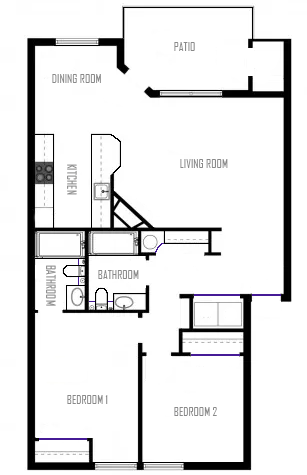
<style>
.page{position:relative;width:307px;height:475px;background:#ffffff}
.page>*{position:absolute;margin:0}
.t1{font:12px "AgencyFB-Reg";color:#8a8a8a}
</style>
<div class="page">
<p class="t1" style="left:174px;top:42px;width:21px;height:9px">PATIO</p>
<p class="t1" style="left:52px;top:74px;width:49px;height:9px">DINING ROOM</p>
<p class="t1" style="left:180px;top:159px;width:48px;height:9px">LIVING ROOM</p>
<p class="t1" style="left:67px;top:164px;width:10px;height:31px;rotate:90deg">KITCHEN</p>
<p class="t1" style="left:46px;top:265px;width:10px;height:41px;rotate:90deg">BATHROOM</p>
<p class="t1" style="left:98px;top:270px;width:41px;height:9px">BATHROOM</p>
<p class="t1" style="left:67px;top:395px;width:41px;height:9px">BEDROOM 1</p>
<p class="t1" style="left:174px;top:407px;width:43px;height:9px">BEDROOM 2</p>
</div>
